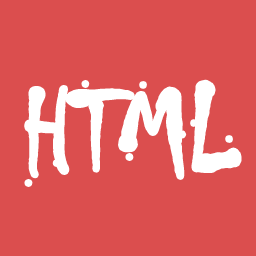
<style>
.page{position:relative;width:256px;height:256px;background:#db4e4e}
.page>*{position:absolute;margin:0}
.t1{font:120px "Chiller-Regular";color:#ffffff}
</style>
<div class="page">
<p class="t1" style="left:27px;top:82px;width:212px;height:102px">HTML</p>
</div>
